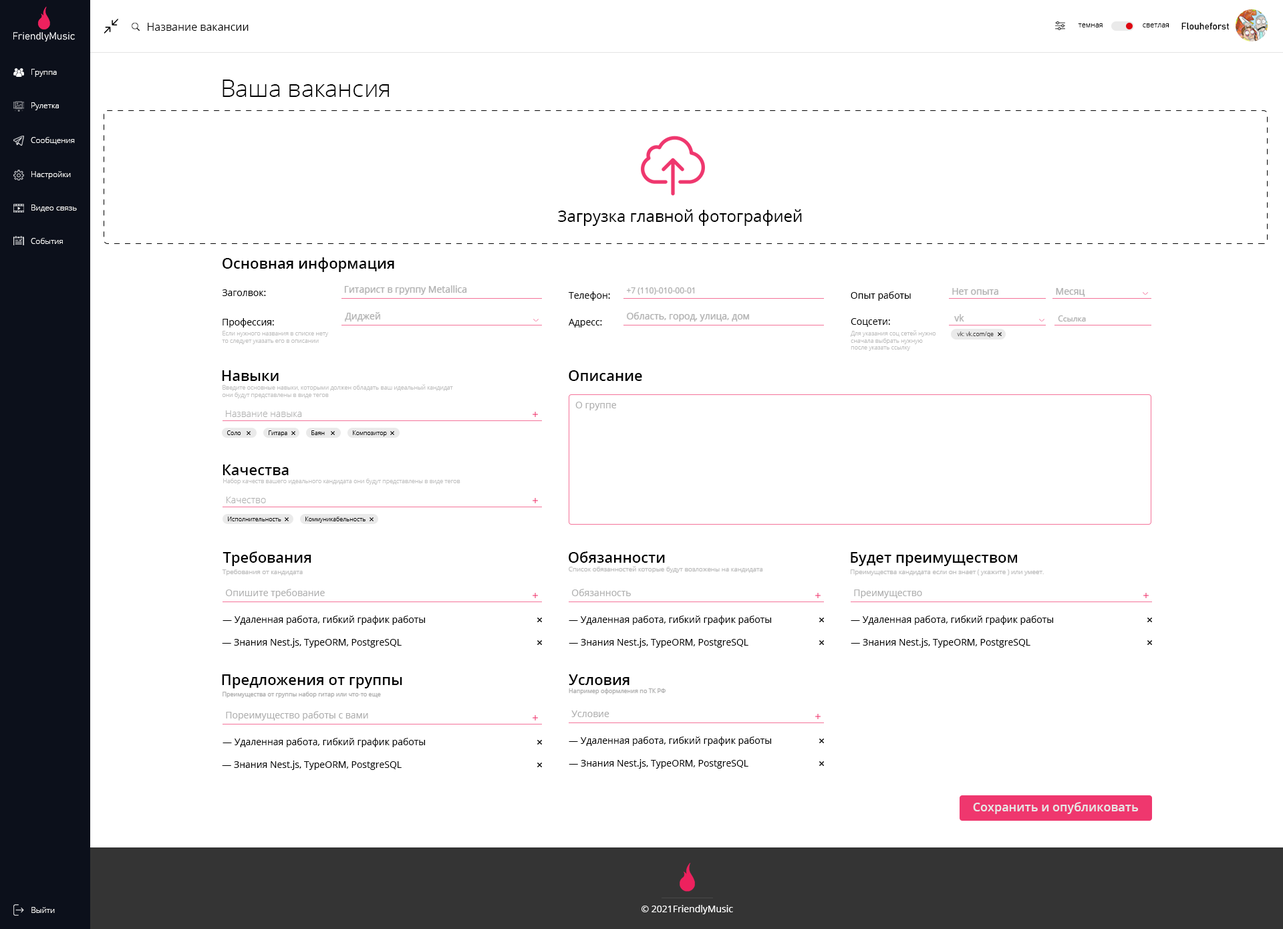
<style>
.page{position:relative;width:1283px;height:929px;background:#ffffff}
.page>*{position:absolute;margin:0}
.t1{font:10.7px "OpenSans";color:#000000}
.t2{font:7.4px "OpenSans-Light";color:#000000}
.t3{font:9.4px "Bahnschrift";color:#000000}
.t4{font:8px "OpenSans-Light";color:#ffffff}
.t5{font:24.1px "OpenSans-Light";color:#000000}
.t6{font:16px "aakar-medium";color:#000000}
.t7{font:14.7px "OpenSans-Semibold";color:#000000}
.t8{font:9.4px "aakar-medium";color:#000000}
.t9{font:9.4px "aakar-medium";color:#afafaf}
.t10{font:8px "aakar-medium";color:#afafaf}
.t11{font:6px "OpenSans-Light";color:#bfbfbf}
.t12{font:6px "OpenSans-Light";color:#424040}
.t13{font:9.4px "OpenSans";color:#afafaf}
.t14{font:9.4px "OpenSans-Light";color:#afafaf}
.t15{font:6px "OpenSans-Light";color:#000000}
.t16{font:6.7px "OpenSans-Light";color:#bfbfbf}
.t17{font:6px "aakar-medium";color:#afafaf}
.t18{font:12px "OpenSans-Semibold";color:#e6e6e6}
.t19{font:9.4px "aakar-medium";color:#ffffff}
</style>
<div class="page">
<p class="t1" style="left:148px;top:23px;width:101px;height:8px">Название вакансии</p>
<p class="t2" style="left:1078px;top:23px;width:25px;height:4px">темная</p>
<p class="t2" style="left:1143px;top:23px;width:26px;height:4px">светлая</p>
<p class="t3" style="left:1182px;top:22px;width:48px;height:8px">Flouheforst</p>
<p class="t4" style="left:31px;top:69px;width:26px;height:8px">Группа</p>
<p class="t5" style="left:223px;top:80px;width:166px;height:17px">Ваша вакансия</p>
<p class="t4" style="left:31px;top:102px;width:28px;height:8px">Рулетка</p>
<p class="t4" style="left:31px;top:137px;width:44px;height:7px">Сообщения</p>
<p class="t4" style="left:31px;top:171px;width:40px;height:8px">Настройки</p>
<p class="t4" style="left:31px;top:205px;width:46px;height:7px">Видео связь</p>
<p class="t6" style="left:558px;top:209px;width:244px;height:17px">Загрузка главной фотографией</p>
<p class="t4" style="left:31px;top:238px;width:32px;height:6px">События</p>
<p class="t7" style="left:223px;top:257px;width:171px;height:15px">Основная информация</p>
<p class="t8" style="left:222px;top:289px;width:44px;height:7px">Заголвок:</p>
<p class="t9" style="left:345px;top:285px;width:122px;height:10px">Гитарист в группу Metallica</p>
<p class="t8" style="left:569px;top:291px;width:41px;height:10px">Телефон:</p>
<p class="t10" style="left:627px;top:287px;width:68px;height:8px">+7 (110)-010-00-01</p>
<p class="t8" style="left:851px;top:291px;width:60px;height:10px">Опыт работы</p>
<p class="t9" style="left:953px;top:288px;width:46px;height:7px">Нет опыта</p>
<p class="t9" style="left:1056px;top:288px;width:30px;height:9px">Месяц</p>
<p class="t9" style="left:345px;top:312px;width:35px;height:10px">Диджей</p>
<p class="t9" style="left:627px;top:312px;width:122px;height:10px">Область, город, улица, дом</p>
<p class="t9" style="left:955px;top:314px;width:10px;height:8px">vk</p>
<p class="t10" style="left:1058px;top:316px;width:28px;height:6px">Ссылка</p>
<p class="t8" style="left:223px;top:318px;width:51px;height:10px">Профессия:</p>
<p class="t8" style="left:569px;top:319px;width:33px;height:9px">Адресс:</p>
<p class="t8" style="left:851px;top:318px;width:39px;height:9px">Соцсети:</p>
<p class="t11" style="left:222px;top:331px;width:107px;height:13px">Если нужного названия в списке нету<br>то следует указать его в описании</p>
<p class="t11" style="left:851px;top:330px;width:85px;height:21px">Для указания соц сетей нужно<br>сначала выбрать нужную<br>после указать ссылку</p>
<p class="t12" style="left:957px;top:332px;width:37px;height:6px">vk: vk.com/qe</p>
<p class="t7" style="left:222px;top:370px;width:57px;height:11px">Навыки</p>
<p class="t7" style="left:569px;top:370px;width:73px;height:11px">Описание</p>
<p class="t11" style="left:222px;top:384px;width:231px;height:14px">Введите основные навыки, которыми должен обладать ваш идеальный кандидат<br>они будут представлены в виде тегов</p>
<p class="t13" style="left:576px;top:402px;width:40px;height:8px">О группе</p>
<p class="t14" style="left:226px;top:410px;width:76px;height:7px">Название навыка</p>
<p class="t15" style="left:227px;top:430px;width:14px;height:5px">Соло</p>
<p class="t15" style="left:269px;top:430px;width:18px;height:6px">Гитара</p>
<p class="t15" style="left:311px;top:430px;width:14px;height:5px">Баян</p>
<p class="t15" style="left:353px;top:430px;width:34px;height:6px">Композитор</p>
<p class="t7" style="left:223px;top:465px;width:66px;height:10px">Качества</p>
<p class="t11" style="left:223px;top:479px;width:238px;height:6px">Набор качеств вашего идеального кандидата они будут представлены в виде тегов</p>
<p class="t14" style="left:227px;top:497px;width:39px;height:6px">Качество</p>
<p class="t15" style="left:228px;top:517px;width:53px;height:4px">Исполнительность</p>
<p class="t15" style="left:305px;top:517px;width:61px;height:6px">Коммуникабельность</p>
<p class="t7" style="left:223px;top:551px;width:88px;height:15px">Требования</p>
<p class="t7" style="left:569px;top:551px;width:96px;height:12px">Обязанности</p>
<p class="t7" style="left:851px;top:552px;width:166px;height:14px">Будет преимуществом</p>
<p class="t16" style="left:222px;top:570px;width:81px;height:6px">Требования от кандидата</p>
<p class="t16" style="left:569px;top:566px;width:194px;height:7px">Список обязанностей которые будут возложены на кандидата</p>
<p class="t16" style="left:851px;top:570px;width:193px;height:6px">Преимущества кандидата если он знает ( укажите ) или умеет.</p>
<p class="t13" style="left:226px;top:589px;width:99px;height:9px">Опишите требование</p>
<p class="t13" style="left:572px;top:589px;width:59px;height:7px">Обязанность</p>
<p class="t13" style="left:854px;top:590px;width:68px;height:8px">Преимущество</p>
<p class="t8" style="left:223px;top:616px;width:202px;height:9px">— Удаленная работа, гибкий график работы</p>
<p class="t8" style="left:569px;top:616px;width:202px;height:9px">— Удаленная работа, гибкий график работы</p>
<p class="t8" style="left:851px;top:616px;width:202px;height:9px">— Удаленная работа, гибкий график работы</p>
<p class="t8" style="left:222px;top:638px;width:180px;height:10px">— Знания Nest.js, TypeORM, PostgreSQL</p>
<p class="t8" style="left:569px;top:638px;width:180px;height:10px">— Знания Nest.js, TypeORM, PostgreSQL</p>
<p class="t8" style="left:851px;top:638px;width:180px;height:10px">— Знания Nest.js, TypeORM, PostgreSQL</p>
<p class="t7" style="left:222px;top:674px;width:180px;height:14px">Предложения от группы</p>
<p class="t7" style="left:569px;top:674px;width:61px;height:11px">Условия</p>
<p class="t17" style="left:569px;top:688px;width:97px;height:7px">Например оформления по ТК РФ</p>
<p class="t17" style="left:223px;top:692px;width:158px;height:6px">Преимущества от группы набор гитар или что-то еще</p>
<p class="t13" style="left:226px;top:711px;width:142px;height:10px">Пореимущество работы с вами</p>
<p class="t13" style="left:572px;top:711px;width:38px;height:6px">Условие</p>
<p class="t8" style="left:223px;top:738px;width:202px;height:9px">— Удаленная работа, гибкий график работы</p>
<p class="t8" style="left:569px;top:737px;width:202px;height:9px">— Удаленная работа, гибкий график работы</p>
<p class="t8" style="left:222px;top:761px;width:180px;height:9px">— Знания Nest.js, TypeORM, PostgreSQL</p>
<p class="t8" style="left:569px;top:759px;width:180px;height:10px">— Знания Nest.js, TypeORM, PostgreSQL</p>
<p class="t18" style="left:973px;top:802px;width:166px;height:12px">Сохранить и опубликовать</p>
<p class="t19" style="left:642px;top:905px;width:91px;height:9px">© 2021FriendlyMusic</p>
<p class="t4" style="left:31px;top:907px;width:24px;height:6px">Выйти</p>
</div>
